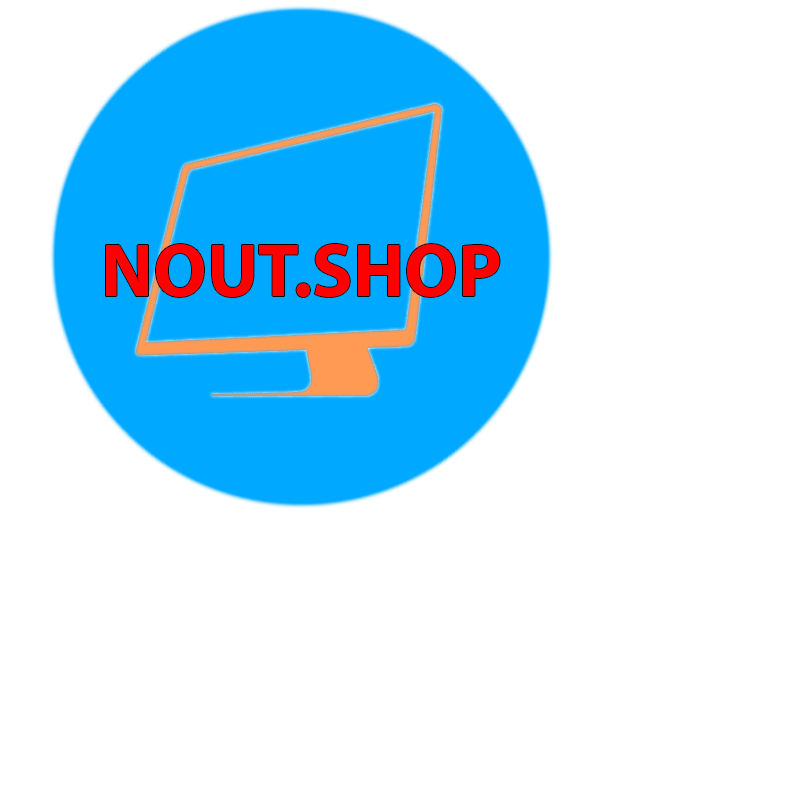
<style>
.page{position:relative;width:800px;height:800px;background:#ffffff}
.page>*{position:absolute;margin:0}
.t1{font:75px "MyriadPro-Bold";color:#ff0000;text-transform:uppercase}
</style>
<div class="page">
<p class="t1" style="left:106px;top:244px;width:394px;height:53px">Nout.Shop</p>
</div>
